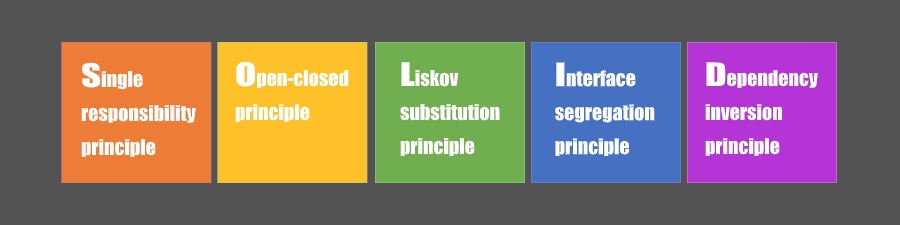
<style>
.page{position:relative;width:900px;height:225px;background:#535353}
.page>*{position:absolute;margin:0}
.t1{font:20px "Impact";color:#ffffff}
.t2{font:30px "Impact";color:#ffffff;scale:1.3 1}
</style>
<div class="page">
<p class="t1" style="left:81px;top:62px;width:115px;height:95px"><span class="t2">S</span>ingle<br>responsibility<br>principle</p>
<p class="t1" style="left:235px;top:61px;width:114px;height:61px"><span class="t2">O</span>pen-closed<br>principle</p>
<p class="t1" style="left:400px;top:62px;width:100px;height:94px"><span class="t2">L</span>iskov<br>substitution<br>principle</p>
<p class="t1" style="left:555px;top:62px;width:100px;height:95px"><span class="t2">I</span>nterface<br>segregation<br>principle</p>
<p class="t1" style="left:705px;top:62px;width:113px;height:94px"><span class="t2">D</span>ependency<br>inversion<br>principle</p>
</div>
